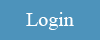
<style>
.page{position:relative;width:100px;height:40px;background:#4d93bb}
.page>*{position:absolute;margin:0}
.t1{font:20px "TimesNewRomanPSMT";color:#ffffff}
</style>
<div class="page">
<p class="t1" style="left:26px;top:12px;width:48px;height:18px">Login</p>
</div>
